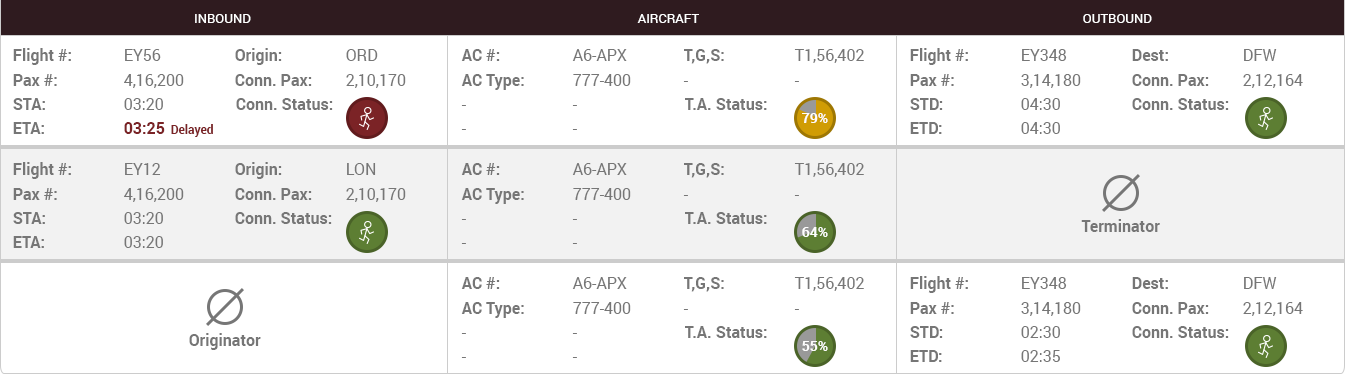
<style>
.page{position:relative;width:1345px;height:374px;background:#ffffff}
.page>*{position:absolute;margin:0}
.t1{font:13px "Roboto-Regular";color:#ffffff;text-transform:uppercase}
.t2{font:16px "Roboto-Bold";color:#767676}
.t3{font:16px "Roboto-Regular";color:#767676}
.t4{font:14px "Roboto-Bold";color:#fefefe}
.t5{font:16px "Roboto-Bold";color:#7b2326}
.t6{font:12px "Roboto-Bold";color:#7b2326}
</style>
<div class="page">
<p class="t1" style="left:195px;top:14px;width:56px;height:9px">Inbound</p>
<p class="t1" style="left:637px;top:14px;width:62px;height:9px">Aircraft</p>
<p class="t1" style="left:1083px;top:14px;width:69px;height:9px">Outbound</p>
<p class="t2" style="left:13px;top:48px;width:58px;height:17px">Flight #:</p>
<p class="t3" style="left:125px;top:49px;width:36px;height:12px">EY56</p>
<p class="t2" style="left:235px;top:48px;width:47px;height:17px">Origin:</p>
<p class="t3" style="left:346px;top:49px;width:32px;height:12px">ORD</p>
<p class="t2" style="left:461px;top:49px;width:39px;height:12px">AC #:</p>
<p class="t3" style="left:572px;top:49px;width:55px;height:12px">A6-APX</p>
<p class="t2" style="left:684px;top:49px;width:40px;height:15px">T,G,S:</p>
<p class="t3" style="left:794px;top:49px;width:70px;height:14px">T1,56,402</p>
<p class="t2" style="left:910px;top:48px;width:58px;height:17px">Flight #:</p>
<p class="t3" style="left:1022px;top:49px;width:45px;height:12px">EY348</p>
<p class="t2" style="left:1132px;top:49px;width:36px;height:12px">Dest:</p>
<p class="t3" style="left:1244px;top:49px;width:33px;height:12px">DFW</p>
<p class="t2" style="left:13px;top:74px;width:44px;height:12px">Pax #:</p>
<p class="t3" style="left:124px;top:74px;width:60px;height:14px">4,16,200</p>
<p class="t2" style="left:235px;top:74px;width:77px;height:12px">Conn. Pax:</p>
<p class="t3" style="left:346px;top:74px;width:60px;height:14px">2,10,170</p>
<p class="t2" style="left:461px;top:74px;width:63px;height:16px">AC Type:</p>
<p class="t3" style="left:573px;top:74px;width:58px;height:12px">777-400</p>
<p class="t2" style="left:910px;top:74px;width:44px;height:12px">Pax #:</p>
<p class="t3" style="left:1021px;top:74px;width:60px;height:14px">3,14,180</p>
<p class="t2" style="left:1132px;top:74px;width:77px;height:12px">Conn. Pax:</p>
<p class="t3" style="left:1243px;top:74px;width:60px;height:14px">2,12,164</p>
<p class="t3" style="left:683px;top:81px;width:5px;height:1px">-</p>
<p class="t3" style="left:794px;top:81px;width:5px;height:1px">-</p>
<p class="t2" style="left:13px;top:98px;width:32px;height:12px">STA:</p>
<p class="t3" style="left:124px;top:98px;width:39px;height:12px">03:20</p>
<p class="t2" style="left:236px;top:98px;width:97px;height:12px">Conn. Status:</p>
<p class="t2" style="left:685px;top:98px;width:82px;height:12px">T.A. Status:</p>
<p class="t2" style="left:910px;top:98px;width:33px;height:12px">STD:</p>
<p class="t3" style="left:1021px;top:98px;width:39px;height:12px">04:30</p>
<p class="t2" style="left:1132px;top:98px;width:97px;height:12px">Conn. Status:</p>
<p class="t3" style="left:461px;top:105px;width:5px;height:1px">-</p>
<p class="t3" style="left:572px;top:105px;width:5px;height:1px">-</p>
<p class="t4" style="left:802px;top:113px;width:26px;height:10px">79%</p>
<p class="t2" style="left:13px;top:122px;width:31px;height:12px">ETA:</p>
<p class="t5" style="left:124px;top:122px;width:41px;height:12px">03:25</p>
<p class="t6" style="left:171px;top:124px;width:42px;height:13px">Delayed</p>
<p class="t2" style="left:910px;top:122px;width:32px;height:12px">ETD:</p>
<p class="t3" style="left:1021px;top:122px;width:39px;height:12px">04:30</p>
<p class="t3" style="left:461px;top:129px;width:5px;height:1px">-</p>
<p class="t3" style="left:572px;top:129px;width:5px;height:1px">-</p>
<p class="t2" style="left:13px;top:162px;width:58px;height:17px">Flight #:</p>
<p class="t3" style="left:125px;top:163px;width:36px;height:12px">EY12</p>
<p class="t2" style="left:235px;top:162px;width:47px;height:17px">Origin:</p>
<p class="t3" style="left:347px;top:163px;width:29px;height:12px">LON</p>
<p class="t2" style="left:461px;top:163px;width:39px;height:12px">AC #:</p>
<p class="t3" style="left:572px;top:163px;width:55px;height:12px">A6-APX</p>
<p class="t2" style="left:684px;top:163px;width:40px;height:15px">T,G,S:</p>
<p class="t3" style="left:794px;top:163px;width:70px;height:14px">T1,56,402</p>
<p class="t2" style="left:13px;top:188px;width:44px;height:12px">Pax #:</p>
<p class="t3" style="left:124px;top:188px;width:60px;height:14px">4,16,200</p>
<p class="t2" style="left:235px;top:188px;width:77px;height:12px">Conn. Pax:</p>
<p class="t3" style="left:346px;top:188px;width:60px;height:14px">2,10,170</p>
<p class="t2" style="left:461px;top:188px;width:63px;height:16px">AC Type:</p>
<p class="t3" style="left:573px;top:188px;width:58px;height:12px">777-400</p>
<p class="t3" style="left:683px;top:195px;width:5px;height:1px">-</p>
<p class="t3" style="left:794px;top:195px;width:5px;height:1px">-</p>
<p class="t2" style="left:13px;top:212px;width:32px;height:12px">STA:</p>
<p class="t3" style="left:124px;top:212px;width:39px;height:12px">03:20</p>
<p class="t2" style="left:235px;top:212px;width:97px;height:12px">Conn. Status:</p>
<p class="t3" style="left:461px;top:219px;width:5px;height:1px">-</p>
<p class="t3" style="left:572px;top:219px;width:5px;height:1px">-</p>
<p class="t2" style="left:685px;top:212px;width:82px;height:12px">T.A. Status:</p>
<p class="t2" style="left:1081px;top:219px;width:79px;height:13px">Terminator</p>
<p class="t4" style="left:802px;top:227px;width:26px;height:10px">64%</p>
<p class="t2" style="left:13px;top:236px;width:31px;height:12px">ETA:</p>
<p class="t3" style="left:124px;top:236px;width:39px;height:12px">03:20</p>
<p class="t3" style="left:461px;top:243px;width:5px;height:1px">-</p>
<p class="t3" style="left:572px;top:243px;width:5px;height:1px">-</p>
<p class="t2" style="left:461px;top:277px;width:39px;height:12px">AC #:</p>
<p class="t3" style="left:572px;top:277px;width:55px;height:12px">A6-APX</p>
<p class="t2" style="left:684px;top:277px;width:40px;height:15px">T,G,S:</p>
<p class="t3" style="left:794px;top:277px;width:70px;height:14px">T1,56,402</p>
<p class="t2" style="left:910px;top:276px;width:58px;height:17px">Flight #:</p>
<p class="t3" style="left:1022px;top:277px;width:45px;height:12px">EY348</p>
<p class="t2" style="left:1132px;top:277px;width:36px;height:12px">Dest:</p>
<p class="t3" style="left:1244px;top:277px;width:33px;height:12px">DFW</p>
<p class="t2" style="left:461px;top:302px;width:63px;height:16px">AC Type:</p>
<p class="t3" style="left:573px;top:302px;width:58px;height:12px">777-400</p>
<p class="t2" style="left:910px;top:302px;width:44px;height:12px">Pax #:</p>
<p class="t3" style="left:1021px;top:302px;width:60px;height:14px">3,14,180</p>
<p class="t2" style="left:1132px;top:302px;width:77px;height:12px">Conn. Pax:</p>
<p class="t3" style="left:1243px;top:302px;width:60px;height:14px">2,12,164</p>
<p class="t3" style="left:683px;top:309px;width:5px;height:1px">-</p>
<p class="t3" style="left:794px;top:309px;width:5px;height:1px">-</p>
<p class="t2" style="left:685px;top:326px;width:82px;height:12px">T.A. Status:</p>
<p class="t2" style="left:910px;top:326px;width:33px;height:12px">STD:</p>
<p class="t3" style="left:1021px;top:326px;width:39px;height:12px">02:30</p>
<p class="t2" style="left:1132px;top:326px;width:97px;height:12px">Conn. Status:</p>
<p class="t2" style="left:189px;top:333px;width:72px;height:17px">Originator</p>
<p class="t3" style="left:461px;top:333px;width:5px;height:1px">-</p>
<p class="t3" style="left:572px;top:333px;width:5px;height:1px">-</p>
<p class="t4" style="left:802px;top:341px;width:26px;height:10px">55%</p>
<p class="t2" style="left:910px;top:350px;width:32px;height:12px">ETD:</p>
<p class="t3" style="left:1021px;top:350px;width:39px;height:12px">02:35</p>
<p class="t3" style="left:461px;top:357px;width:5px;height:1px">-</p>
<p class="t3" style="left:572px;top:357px;width:5px;height:1px">-</p>
</div>
